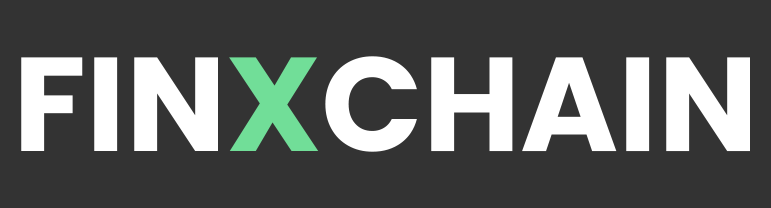
<style>
.page{position:relative;width:771px;height:208px;background:#333333}
.page>*{position:absolute;margin:0}
.t1{font:133.3px "Poppins-Bold";color:#ffffff}
.t2{font:133.3px "Poppins-Bold";color:#71de98}
</style>
<div class="page">
<p class="t1" style="left:21px;top:56px;width:729px;height:96px">FIN<span class="t2">X</span>CHAIN</p>
</div>
